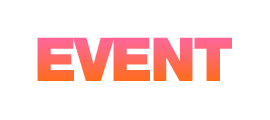
<style>
.page{position:relative;width:270px;height:120px;background:#ffffff}
.page>*{position:absolute;margin:0}
.t1{font:60.6px "Helvetica95-Black";letter-spacing:-0.05em}
</style>
<div class="page">
<p class="t1" style="left:37px;top:37px;width:195px;height:44px">EVENT</p>
</div>
